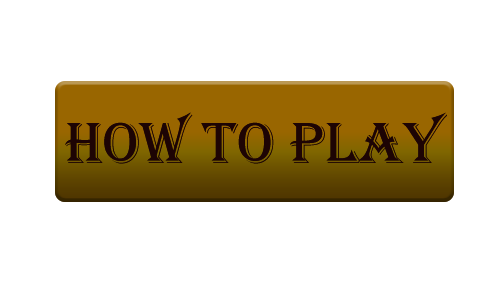
<style>
.page{position:relative;width:500px;height:300px;background:#ffffff}
.page>*{position:absolute;margin:0}
.t1{font:60px "Algerian";color:#1d0404}
</style>
<div class="page">
<p class="t1" style="left:65px;top:112px;width:382px;height:52px">How to play</p>
<p class="t1" style="left:65px;top:112px;width:382px;height:52px">How to play</p>
</div>
